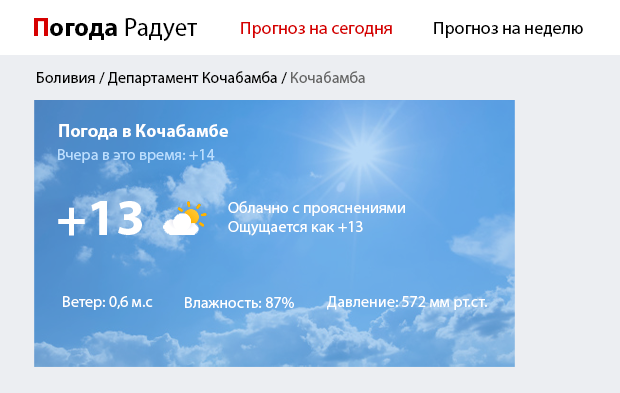
<style>
.page{position:relative;width:620px;height:393px;background:#eceef2}
.page>*{position:absolute;margin:0}
.t1{font:25.8px "MyriadPro-Regular";color:#000000}
.t2{font:25.8px "MyriadPro-Bold";color:#d60000}
.t3{font:25.8px "MyriadPro-Bold";color:#000000}
.t4{font:17.9px "MyriadPro-Regular";color:#d60000}
.t5{font:17.9px "MyriadPro-Regular";color:#000000}
.t6{font:16px "MyriadPro-Regular";color:#000000}
.t7{font:16px "MyriadPro-Regular";color:#666666}
.t8{font:18px "MyriadPro-Bold";color:#ffffff}
.t9{font:16px "MyriadPro-Regular";color:#bbdefe}
.t10{font:52px "MyriadPro-Bold";color:#ffffff}
.t11{font:16px "MyriadPro-Regular";color:#ffffff}
</style>
<div class="page">
<p class="t1" style="left:34px;top:18px;width:163px;height:24px"><span class="t2">П</span><span class="t3">огода</span> Радует</p>
<p class="t4" style="left:241px;top:22px;width:151px;height:16px">Прогноз на сегодня</p>
<p class="t5" style="left:434px;top:22px;width:149px;height:16px">Прогноз на неделю</p>
<p class="t6" style="left:37px;top:71px;width:328px;height:15px">Боливия / Департамент Кочабамба / <span class="t7">Кочабамба</span></p>
<p class="t8" style="left:59px;top:124px;width:169px;height:16px">Погода в Кочабамбе</p>
<p class="t9" style="left:58px;top:149px;width:157px;height:14px">Вчера в это время: +14</p>
<p class="t10" style="left:58px;top:201px;width:84px;height:35px">+13</p>
<p class="t11" style="left:228px;top:201px;width:177px;height:35px">Облачно с прояснениями<br>Ощущается как +13</p>
<p class="t11" style="left:63px;top:296px;width:90px;height:14px">Ветер: 0,6 м.с</p>
<p class="t11" style="left:185px;top:297px;width:109px;height:12px">Влажность: 87%</p>
<p class="t11" style="left:327px;top:296px;width:160px;height:14px">Давление: 572 мм рт.ст.</p>
</div>
